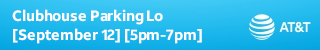
<style>
.page{position:relative;width:320px;height:50px}
.page>*{position:absolute;margin:0}
.t1{font:15px/19px "ATTAleckSans_Bold";letter-spacing:-0.01em;color:#fefefe}
</style>
<div class="page">
<p class="t1" style="left:12px;top:9px;width:190px;height:35px">Clubhouse Parking Lo<br>[September 12] [5pm-7pm]</p>
</div>
